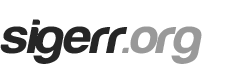
<style>
.page{position:relative;width:250px;height:75px;background:#ffffff}
.page>*{position:absolute;margin:0}
.t1{font:50px "Harabara-Bold";color:#262626;font-style:italic;scale:1.1 1}
.t2{font:50px "Harabara-Bold";color:#999999;font-style:italic;scale:1.1 1}
</style>
<div class="page">
<p class="t1" style="left:0px;top:19px;width:202px;height:45px">sigerr<span class="t2">.org</span></p>
</div>
